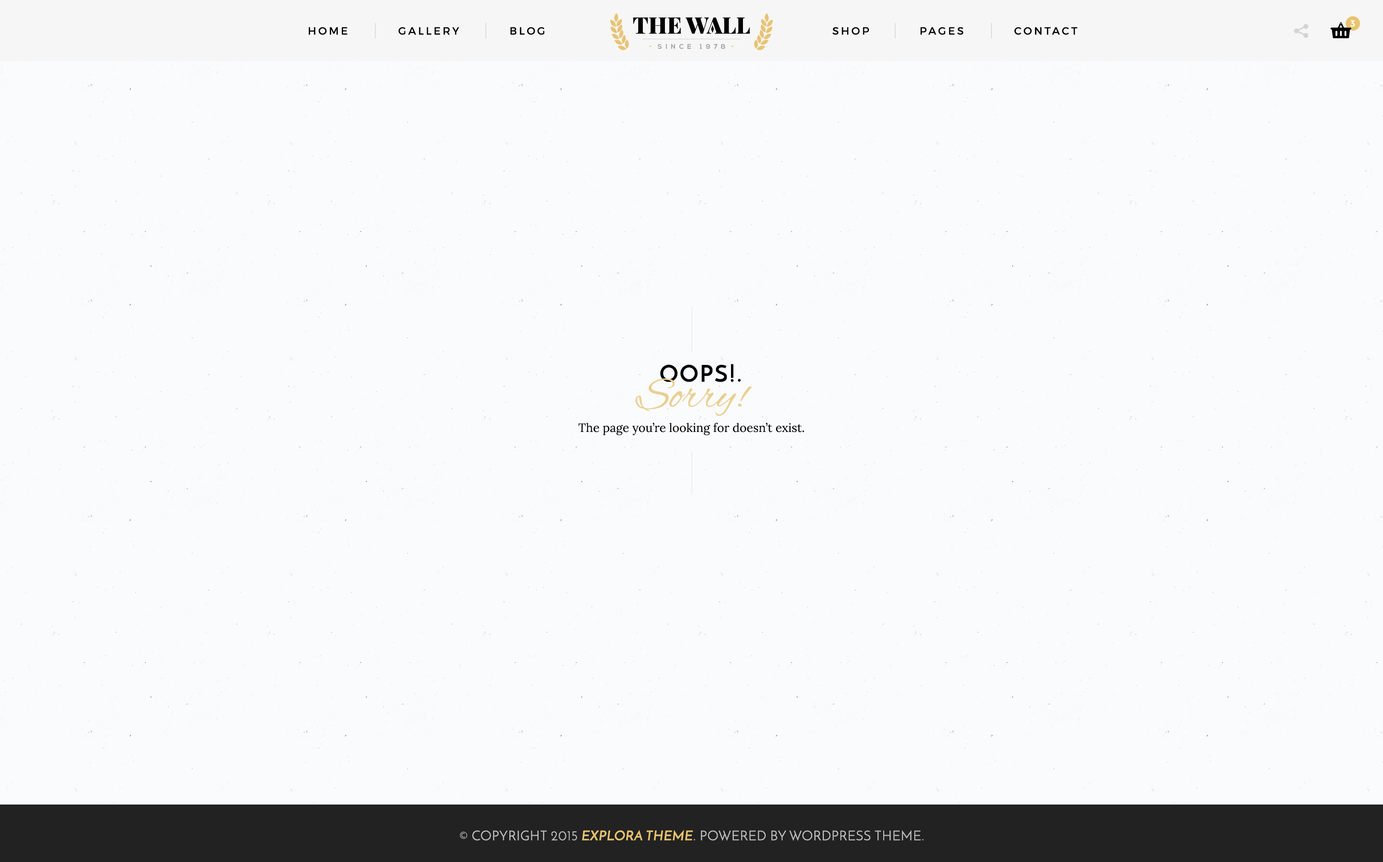
<style>
.page{position:relative;width:1383px;height:862px;background:#fafbfd}
.page>*{position:absolute;margin:0}
.t1{font:10.5px "Montserrat-Regular";letter-spacing:0.2em;color:#000000;text-transform:uppercase}
.t2{font:8.6px "Montserrat-Regular";letter-spacing:0.2em;color:#ffffff;text-transform:uppercase}
.t3{font:23px "JosefinSans-Bold";letter-spacing:0.06em;color:#000000;text-transform:uppercase}
.t4{font:45px "AlexBrush-Regular";color:#e9cf92}
.t5{font:12px "Lora-Regular";color:#000000}
.t6{font:13.4px "JosefinSans";letter-spacing:0.02em;color:#c1c0c0;text-transform:uppercase}
.t7{font:13.4px "JosefinSans-SemiBold";letter-spacing:0.02em;color:#e8c46e;text-transform:uppercase}
</style>
<div class="page">
<p class="t1" style="left:309px;top:27px;width:769px;height:8px">HOME          GALLERY          BLOG                                                           SHOP          PAGES          CONTACT</p>
<p class="t2" style="left:1350px;top:20px;width:5px;height:7px">3</p>
<p class="t3" style="left:660px;top:364px;width:81px;height:18px">OOPS!.</p>
<p class="t4" style="left:635px;top:378px;width:117px;height:38px">Sorry!</p>
<p class="t5" style="left:578px;top:422px;width:226px;height:13px">The page you’re looking for doesn’t exist.</p>
<p class="t6" style="left:460px;top:830px;width:464px;height:11px">© COPYRIGHT 2015 <span class="t7">EXPLORA THEME</span>. POWERED BY WORDPRESS THEME.</p>
</div>
